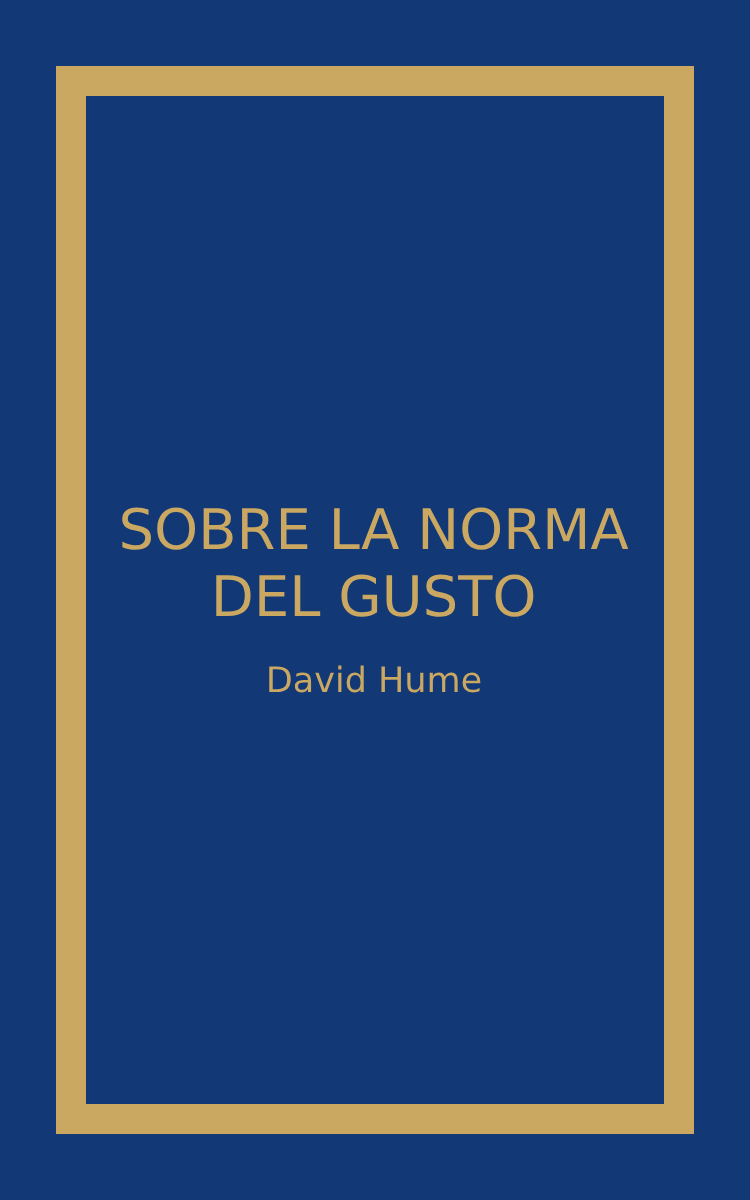
<style>
.page{position:relative;width:750px;height:1200px;background:#123876}
.page>*{position:absolute;margin:0}
.t1{font:56px "DejaVuSans";color:#caa862}
.t2{font:35px "DejaVuSans";color:#caa862}
</style>
<div class="page">
<p class="t1" style="left:122px;top:507px;width:507px;height:110px;text-align:center">SOBRE LA NORMA<br>DEL GUSTO</p>
<p class="t2" style="left:269px;top:665px;width:212px;height:28px">David Hume</p>
</div>
